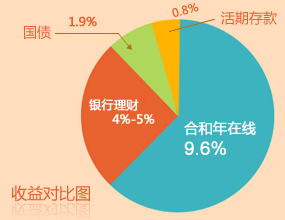
<style>
.page{position:relative;width:285px;height:220px;background:#ffddbd}
.page>*{position:absolute;margin:0}
.t1{font:11px "MicrosoftYaHei";color:#e8622f;font-weight:bold}
.t2{font:12px "MicrosoftYaHei";color:#e8622f;font-weight:bold}
.t3{font:14px "MicrosoftYaHei";color:#e8622f}
.t4{font:12px "MicrosoftYaHei";color:#ffffff;font-weight:bold}
.t5{font:14px "MicrosoftYaHei";color:#ffffff;font-weight:bold}
.t6{font:18px "ArialMT";color:#ffffff;font-weight:bold}
.t7{font:16px "MicrosoftYaHei";color:#e65e2c}
.t8{font:16px "MicrosoftYaHei";color:#fbcaa7}
</style>
<div class="page">
<p class="t1" style="left:172px;top:2px;width:27px;height:15px;rotate:-15deg">0.8%</p>
<p class="t2" style="left:69px;top:16px;width:28px;height:11px">1.9%</p>
<p class="t3" style="left:221px;top:11px;width:56px;height:14px">活期存款</p>
<p class="t3" style="left:24px;top:25px;width:27px;height:14px">国债</p>
<p class="t4" style="left:89px;top:98px;width:66px;height:26px">银行理财<br>      4%-5%</p>
<p class="t5" style="left:184px;top:121px;width:72px;height:34px">合和年在线<br><span class="t6">9.6%</span></p>
<p class="t7" style="left:11px;top:185px;width:79px;height:17px">收益对比图</p>
<p class="t8" style="left:11px;top:202px;width:79px;height:17px">收益对比图</p>
</div>
